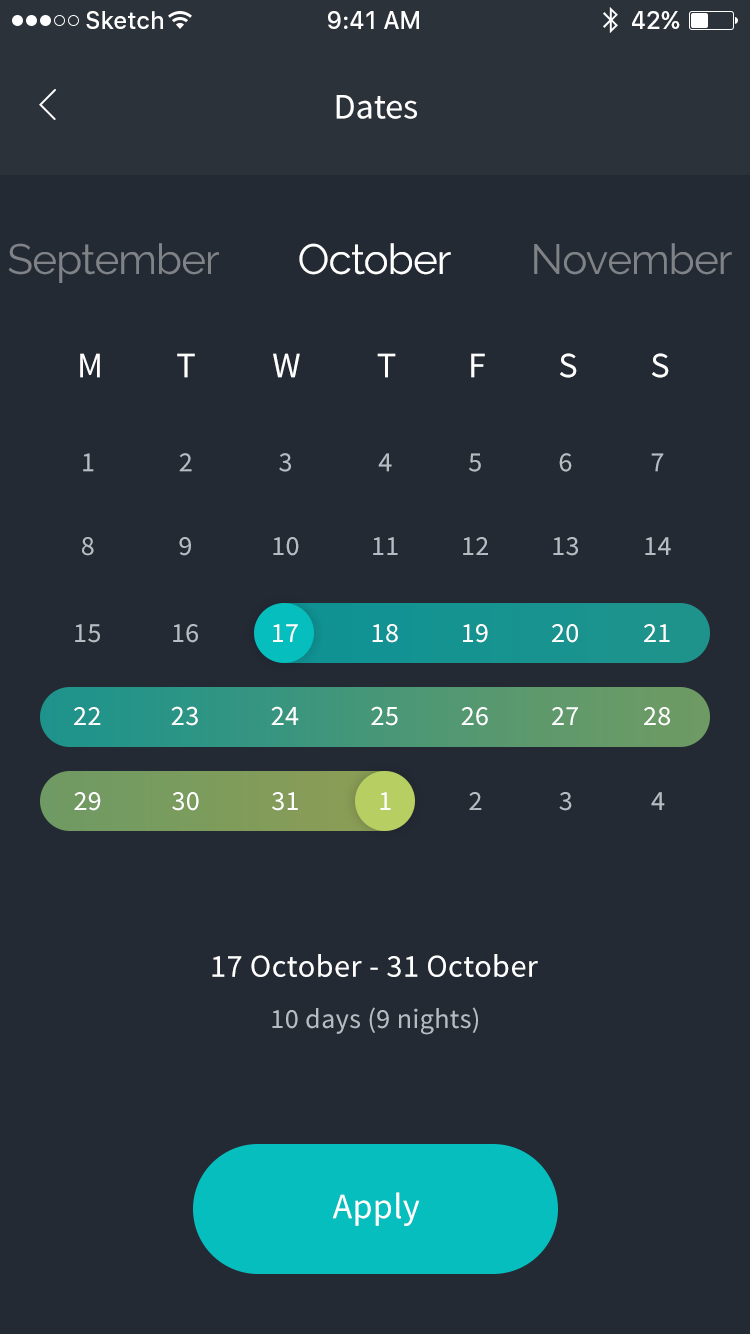
<style>
.page{position:relative;width:750px;height:1334px;background:#242a34}
.page>*{position:absolute;margin:0}
.t1{font:24px "SFUIText-Medium";color:#ffffff}
.t2{font:36px "SourceSansPro-Regular";letter-spacing:-0.005em;color:#ffffff}
.t3{font:42px "Raleway";letter-spacing:-0.02em;color:#7f8286}
.t4{font:42px "Raleway";letter-spacing:-0.02em;color:#ffffff}
.t5{font:28px "SourceSansPro-Regular";letter-spacing:0.015em;color:#b3bdc2}
.t6{font:28px "SourceSansPro-Regular";letter-spacing:0.015em;color:#ffffff}
.t7{font:28.1px "SourceSansPro-Regular";letter-spacing:0.015em;color:#ffffff}
.t8{font:32px "SourceSansPro-Regular";letter-spacing:0.016em;color:#ffffff}
.t9{font:36px "SourceSansPro-Regular";letter-spacing:0.01em;color:#ffffff}
</style>
<div class="page">
<p class="t1" style="left:86px;top:11px;width:77px;height:18px">Sketch</p>
<p class="t1" style="left:328px;top:11px;width:91px;height:18px">9:41 AM</p>
<p class="t1" style="left:632px;top:11px;width:48px;height:18px">42%</p>
<p class="t2" style="left:336px;top:95px;width:81px;height:24px">Dates</p>
<p class="t3" style="left:8px;top:243px;width:211px;height:40px">September</p>
<p class="t4" style="left:299px;top:243px;width:152px;height:32px">October</p>
<p class="t3" style="left:534px;top:243px;width:198px;height:32px">November</p>
<p class="t2" style="left:80px;top:353px;width:20px;height:25px">M</p>
<p class="t2" style="left:177px;top:353px;width:18px;height:25px">T</p>
<p class="t2" style="left:273px;top:353px;width:27px;height:25px">W</p>
<p class="t2" style="left:377px;top:353px;width:19px;height:25px">T</p>
<p class="t2" style="left:471px;top:353px;width:14px;height:25px">F</p>
<p class="t2" style="left:560px;top:353px;width:17px;height:25px">S</p>
<p class="t2" style="left:652px;top:353px;width:17px;height:25px">S</p>
<p class="t5" style="left:83px;top:453px;width:11px;height:19px">1</p>
<p class="t5" style="left:179px;top:453px;width:13px;height:19px">2</p>
<p class="t5" style="left:279px;top:453px;width:12px;height:19px">3</p>
<p class="t5" style="left:378px;top:453px;width:14px;height:19px">4</p>
<p class="t5" style="left:469px;top:453px;width:12px;height:19px">5</p>
<p class="t5" style="left:559px;top:453px;width:13px;height:19px">6</p>
<p class="t5" style="left:651px;top:453px;width:13px;height:19px">7</p>
<p class="t5" style="left:82px;top:537px;width:12px;height:19px">8</p>
<p class="t5" style="left:179px;top:537px;width:12px;height:19px">9</p>
<p class="t5" style="left:273px;top:537px;width:26px;height:19px">10</p>
<p class="t5" style="left:373px;top:537px;width:25px;height:18px">11</p>
<p class="t5" style="left:463px;top:537px;width:25px;height:18px">12</p>
<p class="t5" style="left:553px;top:537px;width:25px;height:19px">13</p>
<p class="t5" style="left:645px;top:537px;width:26px;height:18px">14</p>
<p class="t5" style="left:75px;top:624px;width:25px;height:19px">15</p>
<p class="t5" style="left:173px;top:624px;width:25px;height:19px">16</p>
<p class="t6" style="left:273px;top:624px;width:25px;height:18px">17</p>
<p class="t6" style="left:372px;top:624px;width:26px;height:19px">18</p>
<p class="t6" style="left:463px;top:624px;width:25px;height:19px">19</p>
<p class="t6" style="left:552px;top:624px;width:26px;height:19px">20</p>
<p class="t6" style="left:644px;top:624px;width:26px;height:18px">21</p>
<p class="t6" style="left:74px;top:707px;width:27px;height:18px">22</p>
<p class="t7" style="left:171px;top:706px;width:27px;height:20px">23</p>
<p class="t7" style="left:271px;top:706px;width:28px;height:19px">24</p>
<p class="t7" style="left:371px;top:706px;width:27px;height:20px">25</p>
<p class="t6" style="left:461px;top:707px;width:27px;height:19px">26</p>
<p class="t6" style="left:552px;top:707px;width:26px;height:18px">27</p>
<p class="t6" style="left:644px;top:707px;width:26px;height:19px">28</p>
<p class="t6" style="left:74px;top:792px;width:27px;height:19px">29</p>
<p class="t6" style="left:172px;top:792px;width:27px;height:19px">30</p>
<p class="t6" style="left:272px;top:792px;width:26px;height:19px">31</p>
<p class="t6" style="left:380px;top:792px;width:11px;height:18px">1</p>
<p class="t5" style="left:469px;top:792px;width:13px;height:18px">2</p>
<p class="t5" style="left:559px;top:792px;width:13px;height:19px">3</p>
<p class="t5" style="left:651px;top:792px;width:14px;height:18px">4</p>
<p class="t8" style="left:212px;top:954px;width:326px;height:23px">17 October - 31 October</p>
<p class="t5" style="left:272px;top:1007px;width:206px;height:28px">10 days (9 nights)</p>
<p class="t9" style="left:332px;top:1192px;width:88px;height:34px">Apply</p>
</div>
